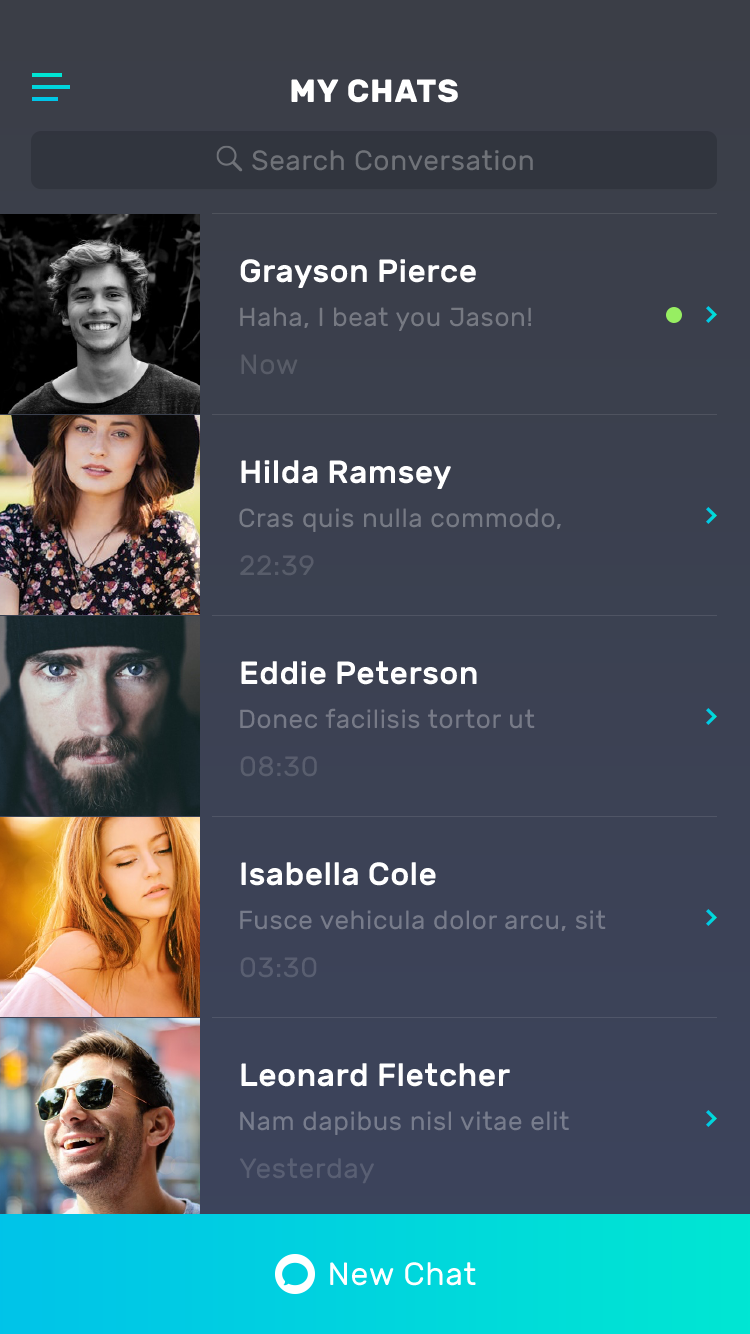
<style>
.page{position:relative;width:750px;height:1334px}
.page>*{position:absolute;margin:0}
.t1{font:32px "Rubik-Bold";letter-spacing:0.03em;color:#ffffff}
.t2{font:28px "Rubik-Regular";letter-spacing:0.025em;color:#6f7278}
.t3{font:32px "Rubik-Medium";letter-spacing:0.013em;color:#ffffff}
.t4{font:26px "Rubik-Regular";letter-spacing:0.025em;color:#767982}
.t5{font:28px "Rubik-Regular";letter-spacing:0.025em;color:#585c67}
.t6{font:26px "Rubik-Regular";letter-spacing:0.025em;color:#767a84}
.t7{font:28px "Rubik-Regular";letter-spacing:0.025em;color:#585d6a}
.t8{font:26px "Rubik-Regular";letter-spacing:0.025em;color:#777a87}
.t9{font:28px "Rubik-Regular";letter-spacing:0.025em;color:#595e6d}
.t10{font:26px "Rubik-Regular";letter-spacing:0.025em;color:#777b8a}
.t11{font:28px "Rubik-Regular";letter-spacing:0.025em;color:#595e71}
.t12{font:26px "Rubik-Regular";letter-spacing:0.025em;color:#777c8c}
.t13{font:28px "Rubik-Regular";letter-spacing:0.025em;color:#595f73}
.t14{font:32px "Rubik-Regular";letter-spacing:0.025em;color:#ffffff}
</style>
<div class="page">
<p class="t1" style="left:291px;top:79px;width:167px;height:24px">MY CHATS</p>
<p class="t2" style="left:252px;top:150px;width:281px;height:21px">Search Conversation</p>
<p class="t3" style="left:240px;top:259px;width:236px;height:29px">Grayson Pierce</p>
<p class="t4" style="left:240px;top:307px;width:291px;height:24px">Haha, I beat you Jason!</p>
<p class="t5" style="left:241px;top:354px;width:57px;height:21px">Now</p>
<p class="t3" style="left:241px;top:460px;width:210px;height:29px">Hilda Ramsey</p>
<p class="t6" style="left:239px;top:508px;width:322px;height:24px">Cras quis nulla commodo,</p>
<p class="t7" style="left:240px;top:555px;width:74px;height:21px">22:39</p>
<p class="t3" style="left:241px;top:661px;width:236px;height:24px">Eddie Peterson</p>
<p class="t8" style="left:240px;top:708px;width:295px;height:21px">Donec facilisis tortor ut</p>
<p class="t9" style="left:240px;top:756px;width:77px;height:21px">08:30</p>
<p class="t3" style="left:241px;top:862px;width:195px;height:24px">Isabella Cole</p>
<p class="t10" style="left:240px;top:910px;width:366px;height:21px">Fusce vehicula dolor arcu, sit</p>
<p class="t11" style="left:240px;top:957px;width:77px;height:21px">03:30</p>
<p class="t3" style="left:241px;top:1063px;width:269px;height:24px">Leonard Fletcher</p>
<p class="t12" style="left:240px;top:1111px;width:329px;height:24px">Nam dapibus nisl vitae elit</p>
<p class="t13" style="left:239px;top:1158px;width:135px;height:26px">Yesterday</p>
<p class="t14" style="left:330px;top:1262px;width:146px;height:24px">New Chat</p>
</div>
